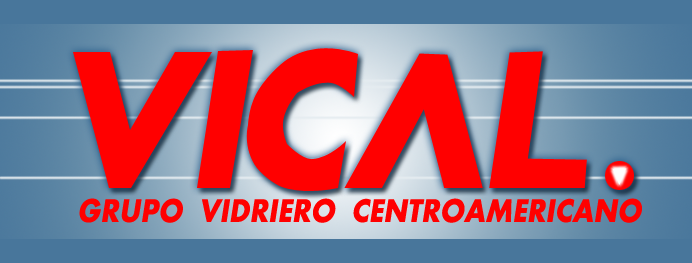
<style>
.page{position:relative;width:692px;height:263px;background:#ff0000}
.page>*{position:absolute;margin:0}
.t1{font:33.6px "Aharoni-Bold";color:#ff0000;font-style:italic;scale:0.88 1}
</style>
<div class="page">
<p class="t1" style="left:79px;top:198px;width:563px;height:25px">GRUPO  VIDRIERO  CENTROAMERICANO</p>
</div>
